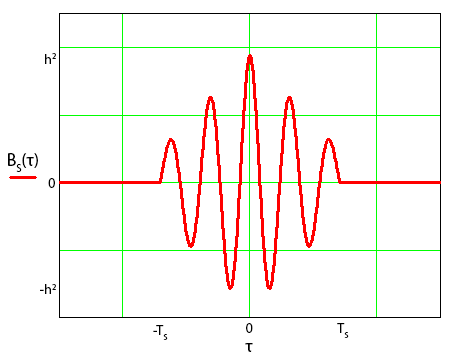
<style>
.page{position:relative;width:457px;height:362px;background:#ffffff}
.page>*{position:absolute;margin:0}
.t1{font:14px "MyriadPro-Regular";color:#000000}
.t2{font:18px "MyriadPro-Regular";color:#000000}
</style>
<div class="page">
<p class="t1" style="left:45px;top:53px;width:11px;height:11px">h2</p>
<p class="t2" style="left:8px;top:153px;width:30px;height:19px">BS(τ)</p>
<p class="t1" style="left:48px;top:178px;width:7px;height:10px">0</p>
<p class="t1" style="left:40px;top:284px;width:16px;height:10px">-h2</p>
<p class="t1" style="left:153px;top:325px;width:15px;height:15px">-TS</p>
<p class="t1" style="left:246px;top:323px;width:7px;height:10px">0</p>
<p class="t1" style="left:337px;top:323px;width:12px;height:15px">TS</p>
<p class="t2" style="left:245px;top:343px;width:8px;height:9px">τ</p>
</div>
